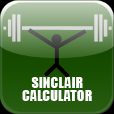
<style>
.page{position:relative;width:114px;height:114px}
.page>*{position:absolute;margin:0}
.t1{font:14.2px "Impact";color:#ffffff}
</style>
<div class="page">
<p class="t1" style="left:31px;top:77px;width:52px;height:11px">SINCLAIR</p>
<p class="t1" style="left:22px;top:90px;width:70px;height:11px">CALCULATOR</p>
</div>
